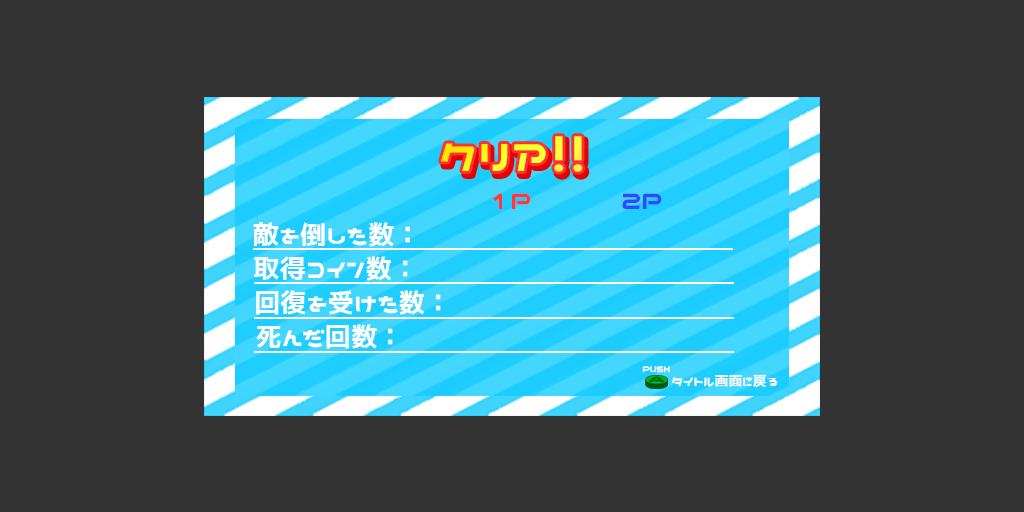
<style>
.page{position:relative;width:1024px;height:512px;background:#333333}
.page>*{position:absolute;margin:0}
.t1{font:46.4px "Nicoca";color:#fff83a}
.t2{font:55px "Nicoca";color:#fff83a}
.t3{font:26.4px "Nicoca";color:#ff3838}
.t4{font:26.4px "Nicoca";color:#324aff}
.t5{font:26.4px "Nicoca";color:#ffffff}
.t6{font:9.4px "Nicoca";color:#ffffff}
.t7{font:14.2px "Nicoca";color:#ffffff}
</style>
<div class="page">
<p class="t1" style="left:441px;top:136px;width:142px;height:36px">クリア<span class="t2">！！</span></p>
<p class="t3" style="left:493px;top:193px;width:38px;height:16px">１P</p>
<p class="t4" style="left:622px;top:193px;width:40px;height:16px">２P</p>
<p class="t5" style="left:253px;top:222px;width:157px;height:25px">敵を倒した数：</p>
<p class="t5" style="left:254px;top:256px;width:154px;height:25px">取得コイン数：</p>
<p class="t5" style="left:256px;top:290px;width:185px;height:25px">回復を受けた数：</p>
<p class="t5" style="left:256px;top:324px;width:137px;height:25px">死んだ回数：</p>
<p class="t6" style="left:642px;top:366px;width:28px;height:7px">PUSH</p>
<p class="t7" style="left:672px;top:374px;width:105px;height:13px">タイトル画面に戻る</p>
</div>
